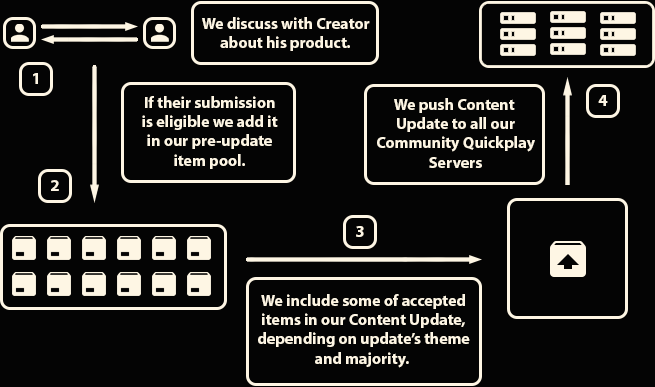
<style>
.page{position:relative;width:655px;height:387px;background:#040404}
.page>*{position:absolute;margin:0}
.t1{font:16px "MyriadPro-Bold";color:#fef6e4}
.t2{font:17px "MyriadPro-Bold";color:#fef6e4}
</style>
<div class="page">
<p class="t1" style="left:202px;top:17px;width:168px;height:34px;text-align:center">We discuss with Creator<br>about his product.</p>
<p class="t2" style="left:33px;top:73px;width:5px;height:11px">1</p>
<p class="t1" style="left:142px;top:96px;width:136px;height:73px;text-align:center">If their submission<br>is eligible we add it<br>in our pre-update<br>item pool.</p>
<p class="t1" style="left:377px;top:98px;width:158px;height:70px;text-align:center">We push Content <br>Update to all our<br>Community Quickplay<br>Servers</p>
<p class="t2" style="left:598px;top:95px;width:10px;height:11px">4</p>
<p class="t2" style="left:51px;top:180px;width:8px;height:11px">2</p>
<p class="t2" style="left:356px;top:226px;width:8px;height:11px">3</p>
<p class="t1" style="left:258px;top:294px;width:212px;height:74px;text-align:center">We include some of accepted<br>items in our Content Update,<br>depending on update’s theme<br>and majority.</p>
</div>
